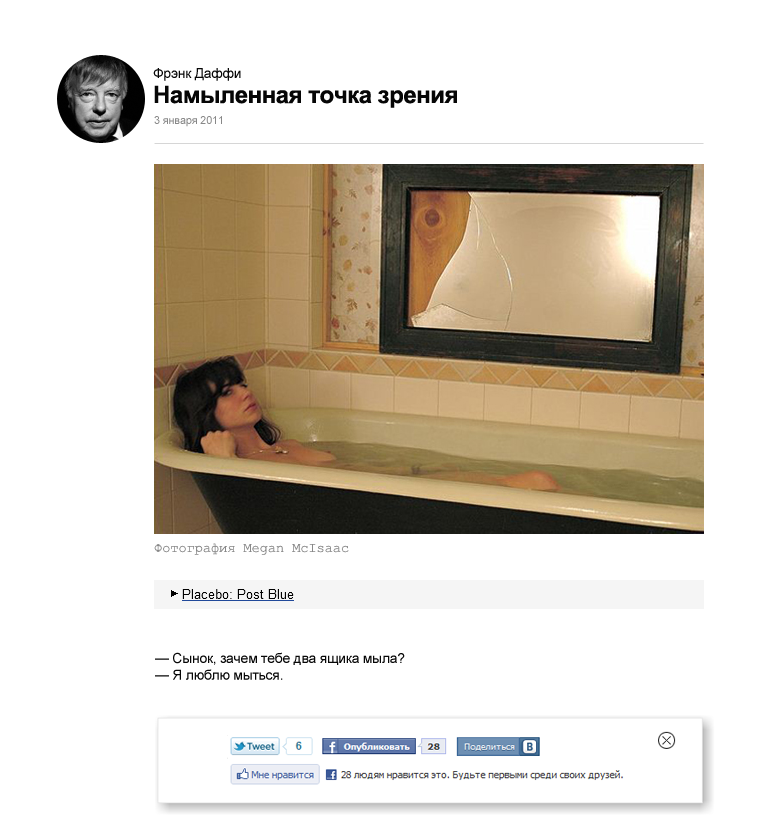
<style>
.page{position:relative;width:780px;height:835px;background:#ffffff}
.page>*{position:absolute;margin:0}
.t1{font:14px "ArialMT";letter-spacing:-0.02em;color:#060606}
.t2{font:24px "Arial-BoldMT";letter-spacing:-0.02em;color:#060606}
.t3{font:11px "ArialMT";letter-spacing:-0.02em;color:#888888}
.t4{font:14px "CourierNewPSMT";letter-spacing:-0.02em;color:#888888}
.t5{font:14px "ArialMT";letter-spacing:-0.02em;color:#070707}
</style>
<div class="page">
<p class="t1" style="left:153px;top:68px;width:88px;height:13px">Фрэнк Даффи</p>
<p class="t2" style="left:154px;top:85px;width:303px;height:23px">Намыленная точка зрения</p>
<p class="t3" style="left:154px;top:116px;width:68px;height:11px">3 января 2011</p>
<p class="t4" style="left:154px;top:543px;width:195px;height:12px">Фотография Megan McIsaac</p>
<p class="t5" style="left:155px;top:652px;width:250px;height:28px">— Сынок, зачем тебе два ящика мыла?<br>— Я люблю мыться.</p>
</div>
